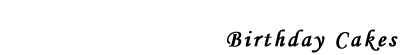
<style>
.page{position:relative;width:400px;height:55px;background:#ffffff}
.page>*{position:absolute;margin:0}
.t1{font:24px "MonotypeCorsiva";letter-spacing:0.1em;color:#000000;font-weight:bold}
</style>
<div class="page">
<p class="t1" style="left:227px;top:29px;width:171px;height:24px">Birthday Cakes</p>
</div>
